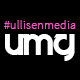
<style>
.page{position:relative;width:80px;height:80px;background:#000000}
.page>*{position:absolute;margin:0}
.t1{font:12px "SourceSansPro-Light";letter-spacing:0.025em;color:#f857c5}
.t2{font:30px "Velocity";color:#ffffff}
</style>
<div class="page">
<p class="t1" style="left:4px;top:20px;width:72px;height:9px">#ullisenmedia</p>
<p class="t2" style="left:5px;top:34px;width:70px;height:27px">umg</p>
</div>
